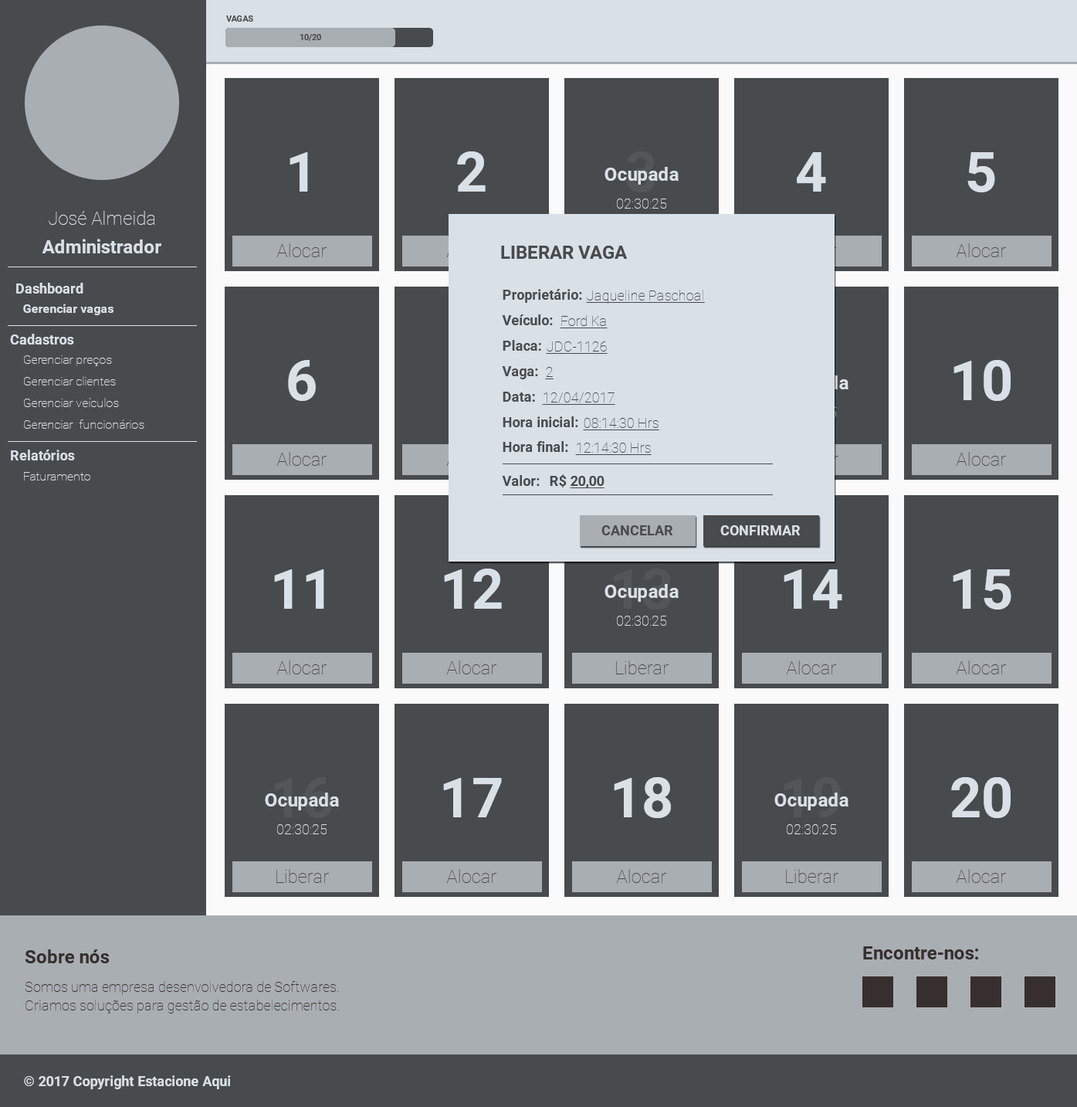
<style>
.page{position:relative;width:1077px;height:1107px;background:#484b4d}
.page>*{position:absolute;margin:0}
.t1{font:8.5px "Roboto-Bold";color:#484b4d;text-transform:uppercase}
.t2{font:8.5px "Roboto-Bold";color:#484b4d}
.t3{font:55.6px "Roboto-Bold";color:#d9e0e6}
.t4{font:18.5px "Roboto-Bold";color:#d9e0e6}
.t5{font:13.9px "Roboto-Thin";color:#d9e0e6}
.t6{font:18.5px "Roboto-Thin";color:#d9e0e6}
.t7{font:18.5px "Roboto-Thin";color:#484b4d}
.t8{font:18.5px "Roboto-Bold";color:#484b4d;text-transform:uppercase}
.t9{font:13.9px "Roboto-Bold";color:#d9e0e6}
.t10{font:13.9px "Roboto-Bold";color:#484b4d}
.t11{font:13.9px "Roboto-Thin";color:#484b4d;text-decoration:underline}
.t12{font:12.4px "Roboto-Bold";color:#d9e0e6}
.t13{font:12.4px "Roboto-Thin";color:#d9e0e6}
.t14{font:13.9px "Roboto-Bold";color:#484b4d;text-decoration:underline}
.t15{font:13.9px "Roboto-Bold";color:#484b4d;text-transform:uppercase}
.t16{font:13.9px "Roboto-Bold";color:#d9e0e6;text-transform:uppercase}
.t17{font:18.5px "Roboto-Bold";color:#362f2d}
.t18{font:13.9px/18.5px "Roboto-Thin";color:#362f2d}
</style>
<div class="page">
<p class="t1" style="left:226px;top:15px;width:27px;height:7px">Vagas</p>
<p class="t2" style="left:300px;top:34px;width:21px;height:7px">10/20</p>
<p class="t3" style="left:290px;top:152px;width:18px;height:40px">1</p>
<p class="t3" style="left:457px;top:151px;width:29px;height:41px">2</p>
<p class="t3" style="left:797px;top:152px;width:29px;height:40px">4</p>
<p class="t3" style="left:968px;top:152px;width:28px;height:40px">5</p>
<p class="t4" style="left:605px;top:167px;width:74px;height:18px">Ocupada</p>
<p class="t5" style="left:617px;top:198px;width:50px;height:11px">02:30:25</p>
<p class="t6" style="left:49px;top:211px;width:106px;height:14px">José Almeida</p>
<p class="t4" style="left:42px;top:239px;width:119px;height:14px">Administrador</p>
<p class="t7" style="left:276px;top:243px;width:51px;height:14px">Alocar</p>
<p class="t8" style="left:501px;top:246px;width:126px;height:13px">liberar vaga</p>
<p class="t7" style="left:956px;top:243px;width:50px;height:14px">Alocar</p>
<p class="t9" style="left:16px;top:283px;width:67px;height:10px">Dashboard</p>
<p class="t10" style="left:503px;top:289px;width:79px;height:14px">Proprietário:</p>
<p class="t11" style="left:586px;top:290px;width:119px;height:14px">Jaqueline Paschoal</p>
<p class="t12" style="left:23px;top:304px;width:91px;height:11px">Gerenciar vagas</p>
<p class="t10" style="left:502px;top:314px;width:51px;height:11px">Veículo:</p>
<p class="t11" style="left:560px;top:315px;width:48px;height:13px">Ford Ka</p>
<p class="t9" style="left:10px;top:334px;width:64px;height:10px">Cadastros</p>
<p class="t10" style="left:503px;top:340px;width:38px;height:11px">Placa:</p>
<p class="t11" style="left:546px;top:341px;width:62px;height:13px">JDC-1126</p>
<p class="t13" style="left:24px;top:355px;width:88px;height:11px">Gerenciar preços</p>
<p class="t3" style="left:288px;top:360px;width:28px;height:41px">6</p>
<p class="t3" style="left:954px;top:360px;width:57px;height:41px">10</p>
<p class="t13" style="left:24px;top:376px;width:92px;height:9px">Gerenciar clientes</p>
<p class="t10" style="left:502px;top:366px;width:36px;height:13px">Vaga:</p>
<p class="t11" style="left:545px;top:367px;width:9px;height:12px">2</p>
<p class="t13" style="left:24px;top:398px;width:95px;height:9px">Gerenciar veículos</p>
<p class="t10" style="left:503px;top:392px;width:32px;height:10px">Data:</p>
<p class="t11" style="left:542px;top:392px;width:74px;height:13px">12/04/2017</p>
<p class="t13" style="left:24px;top:419px;width:120px;height:10px">Gerenciar  funcionários</p>
<p class="t10" style="left:503px;top:416px;width:75px;height:11px">Hora inicial:</p>
<p class="t11" style="left:583px;top:418px;width:77px;height:12px">08:14:30 Hrs</p>
<p class="t9" style="left:11px;top:450px;width:64px;height:10px">Relatórios</p>
<p class="t10" style="left:503px;top:441px;width:65px;height:11px">Hora final:</p>
<p class="t11" style="left:575px;top:443px;width:77px;height:12px">12:14:30 Hrs</p>
<p class="t7" style="left:276px;top:452px;width:51px;height:14px">Alocar</p>
<p class="t7" style="left:956px;top:452px;width:50px;height:14px">Alocar</p>
<p class="t13" style="left:24px;top:472px;width:66px;height:8px">Faturamento</p>
<p class="t10" style="left:502px;top:475px;width:38px;height:11px">Valor:</p>
<p class="t14" style="left:550px;top:474px;width:55px;height:14px"><span class="t10">R$ </span>20,00</p>
<p class="t15" style="left:602px;top:525px;width:71px;height:10px">CancelaR</p>
<p class="t16" style="left:721px;top:525px;width:79px;height:10px">Confirmar</p>
<p class="t3" style="left:274px;top:569px;width:50px;height:40px">11</p>
<p class="t3" style="left:444px;top:568px;width:58px;height:41px">12</p>
<p class="t3" style="left:784px;top:569px;width:59px;height:40px">14</p>
<p class="t3" style="left:953px;top:569px;width:59px;height:40px">15</p>
<p class="t4" style="left:605px;top:584px;width:74px;height:18px">Ocupada</p>
<p class="t5" style="left:617px;top:616px;width:50px;height:10px">02:30:25</p>
<p class="t7" style="left:276px;top:660px;width:51px;height:14px">Alocar</p>
<p class="t7" style="left:446px;top:660px;width:51px;height:14px">Alocar</p>
<p class="t7" style="left:616px;top:660px;width:53px;height:14px">Liberar</p>
<p class="t7" style="left:786px;top:660px;width:50px;height:14px">Alocar</p>
<p class="t7" style="left:956px;top:660px;width:50px;height:14px">Alocar</p>
<p class="t3" style="left:443px;top:778px;width:59px;height:39px">17</p>
<p class="t3" style="left:614px;top:777px;width:57px;height:41px">18</p>
<p class="t3" style="left:952px;top:777px;width:59px;height:41px">20</p>
<p class="t4" style="left:265px;top:792px;width:74px;height:18px">Ocupada</p>
<p class="t4" style="left:775px;top:792px;width:74px;height:18px">Ocupada</p>
<p class="t5" style="left:277px;top:824px;width:50px;height:10px">02:30:25</p>
<p class="t5" style="left:787px;top:824px;width:49px;height:10px">02:30:25</p>
<p class="t7" style="left:276px;top:869px;width:53px;height:14px">Liberar</p>
<p class="t7" style="left:446px;top:869px;width:51px;height:14px">Alocar</p>
<p class="t7" style="left:616px;top:869px;width:51px;height:14px">Alocar</p>
<p class="t7" style="left:786px;top:869px;width:53px;height:14px">Liberar</p>
<p class="t7" style="left:956px;top:869px;width:50px;height:14px">Alocar</p>
<p class="t17" style="left:25px;top:949px;width:85px;height:14px">Sobre nós</p>
<p class="t17" style="left:863px;top:946px;width:116px;height:13px">Encontre-nos:</p>
<p class="t18" style="left:25px;top:981px;width:314px;height:32px">Somos uma empresa desenvolvedora de Softwares. Criamos soluções para gestão de estabelecimentos.</p>
<p class="t9" style="left:24px;top:1075px;width:207px;height:14px">© 2017 Copyright Estacione Aqui</p>
</div>
